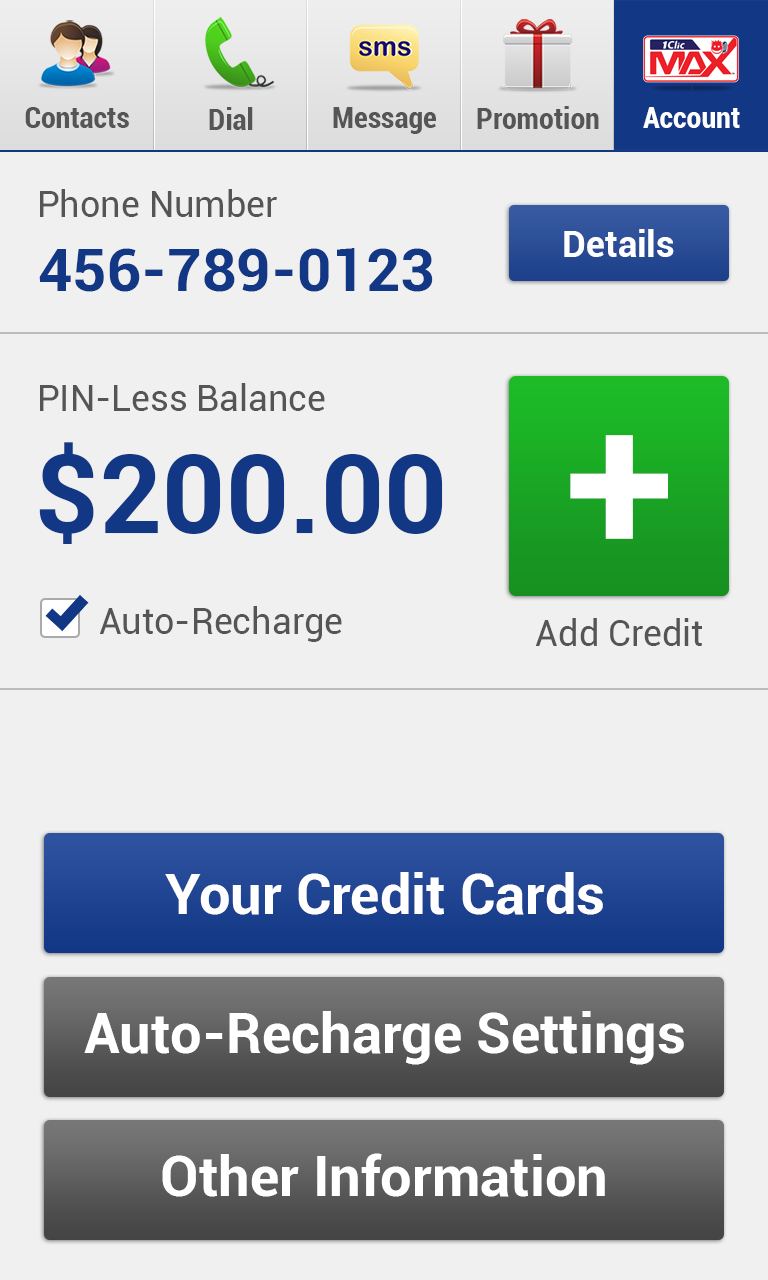
<style>
.page{position:relative;width:768px;height:1280px;background:#f0f0f0}
.page>*{position:absolute;margin:0}
.t1{font:30px "Roboto-BoldCondensed";color:#555555}
.t2{font:30px "Roboto-BoldCondensed";color:#ffffff}
.t3{font:36px "Roboto-Regular";color:#555555}
.t4{font:36px "Roboto-Bold";color:#ffffff}
.t5{font:60px "Roboto-Bold";color:#123785}
.t6{font:200px "Roboto-Bold";color:#ffffff}
.t7{font:110px "Roboto-Bold";color:#123785}
.t8{font:56px "Roboto-Bold";color:#ffffff}
</style>
<div class="page">
<p class="t1" style="left:25px;top:107px;width:104px;height:21px">Contacts</p>
<p class="t1" style="left:209px;top:107px;width:44px;height:23px">Dial</p>
<p class="t1" style="left:333px;top:107px;width:103px;height:27px">Message</p>
<p class="t1" style="left:477px;top:106px;width:122px;height:23px">Promotion</p>
<p class="t2" style="left:643px;top:107px;width:97px;height:21px">Account</p>
<p class="t3" style="left:40px;top:189px;width:237px;height:28px">Phone Number</p>
<p class="t4" style="left:564px;top:229px;width:110px;height:28px">Details</p>
<p class="t5" style="left:39px;top:248px;width:394px;height:44px">456-789-0123</p>
<p class="t3" style="left:40px;top:383px;width:285px;height:28px">PIN-Less Balance</p>
<p class="t6" style="left:570px;top:435px;width:98px;height:104px">+</p>
<p class="t7" style="left:39px;top:442px;width:404px;height:102px">$200.00</p>
<p class="t3" style="left:99px;top:606px;width:243px;height:36px">Auto-Recharge</p>
<p class="t3" style="left:535px;top:618px;width:168px;height:28px">Add Credit</p>
<p class="t8" style="left:165px;top:872px;width:438px;height:43px">Your Credit Cards</p>
<p class="t8" style="left:84px;top:1011px;width:600px;height:54px">Auto-Recharge Settings</p>
<p class="t8" style="left:162px;top:1153px;width:443px;height:44px">Other Information</p>
</div>
